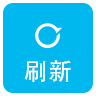
<style>
.page{position:relative;width:96px;height:96px;background:#00b7ee}
.page>*{position:absolute;margin:0}
.t1{font:24px "AdobeHeitiStd-Regular";color:#fafcfd}
</style>
<div class="page">
<p class="t1" style="left:24px;top:60px;width:47px;height:22px">刷新</p>
</div>
